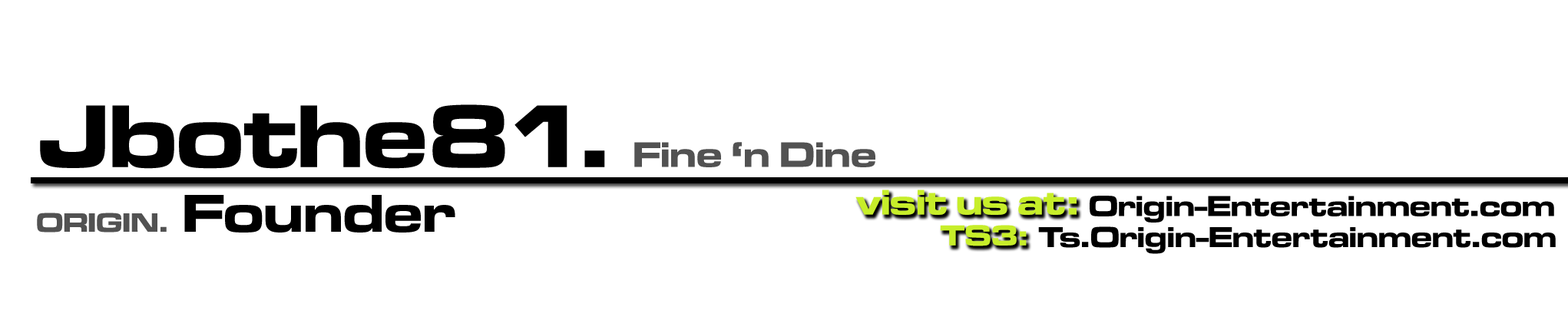
<style>
.page{position:relative;width:1568px;height:320px;background:#ffffff}
.page>*{position:absolute;margin:0}
.t1{font:36.9px "MicrogrammaDOT-BoldExtended";color:#525252}
.t2{font:92.1px "MicrogrammaDOT-BoldExtended";color:#000000}
.t3{font:27.6px "MicrogrammaDOT-BoldExtended";color:#525252}
.t4{font:55.3px "MicrogrammaDOT-BoldExtended";color:#000000}
.t5{font:36.9px "MicrogrammaDOT-BoldExtended";color:#c7ee2a}
.t6{font:29.9px "MicrogrammaDOT-BoldExtended";color:#000000}
.t7{font:29.9px "MicrogrammaDOT-BoldExtended";color:#c7ee2a}
</style>
<div class="page">
<p class="t1" style="left:40px;top:104px;width:835px;height:65px"><span class="t2">Jbothe81. </span>Fine ‘n Dine</p>
<p class="t3" style="left:37px;top:195px;width:418px;height:38px">ORIGIN.<span class="t4"> Founder</span></p>
<p class="t5" style="left:855px;top:190px;width:222px;height:25px">visit us at:</p>
<p class="t6" style="left:1090px;top:196px;width:464px;height:27px">Origin-Entertainment.com</p>
<p class="t7" style="left:940px;top:225px;width:87px;height:21px">TS3:</p>
<p class="t6" style="left:1038px;top:227px;width:518px;height:27px">Ts.Origin-Entertainment.com</p>
</div>
